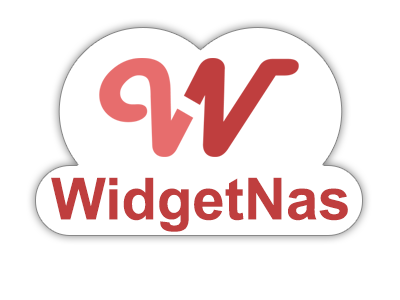
<style>
.page{position:relative;width:400px;height:300px;background:#ffffff}
.page>*{position:absolute;margin:0}
.t1{font:58.1px "Arial-BoldMT";color:#bf3e3e}
</style>
<div class="page">
<p class="t1" style="left:51px;top:177px;width:297px;height:55px">WidgetNas</p>
</div>
